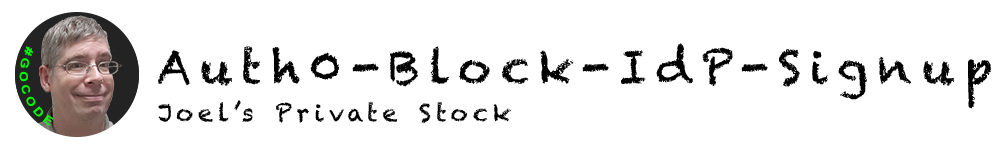
<style>
.page{position:relative;width:1000px;height:150px;background:#ffffff}
.page>*{position:absolute;margin:0}
.t1{font:11.2px "Arial-BoldMT";letter-spacing:0.2em;color:#00ff00}
.t2{font:46px "Chalkduster";letter-spacing:0.2em;color:#000000}
.t3{font:24px "Chalkduster";letter-spacing:0.2em;color:#000000}
</style>
<div class="page">
<p class="t1" style="left:19px;top:46px;width:35px;height:80px;rotate:72deg">#GOCODE</p>
<p class="t2" style="left:158px;top:43px;width:833px;height:66px">Auth0-Block-IdP-Signup</p>
<p class="t3" style="left:158px;top:100px;width:353px;height:23px">Joel’s Private Stock</p>
</div>
